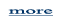
<style>
.page{position:relative;width:60px;height:23px;background:#ffffff}
.page>*{position:absolute;margin:0}
.t1{font:9px "TimesNewRomanPSMT";color:#003366;text-decoration:underline;scale:2.38 1}
</style>
<div class="page">
<p class="t1" style="left:8px;top:9px;width:45px;height:7px">more</p>
</div>
